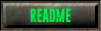
<style>
.page{position:relative;width:101px;height:31px}
.page>*{position:absolute;margin:0}
.t1{font:19px "Sunzoomspark";color:#00f546}
</style>
<div class="page">
<p class="t1" style="left:30px;top:8px;width:41px;height:15px">README</p>
</div>
